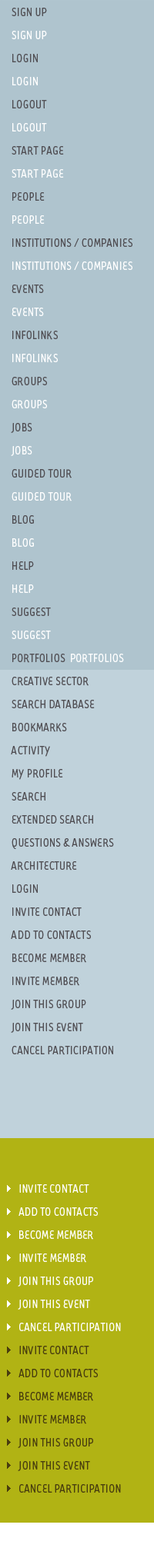
<style>
.page{position:relative;width:154px;height:1568px;background:#afc4ce}
.page>*{position:absolute;margin:0}
.t1{font:13.1px/23.1px "TarzanaNarrow";color:#504e53;text-transform:uppercase}
.t2{font:13.1px/23.1px "TarzanaNarrow";color:#ffffff;text-transform:uppercase}
.t3{font:13.1px/23.1px "TarzanaNarrow";color:#fefefe;text-transform:uppercase}
.t4{font:13.1px/23.1px "TarzanaNarrow";color:#483d0e;text-transform:uppercase}
</style>
<div class="page">
<p class="t1" style="left:11px;top:8px;width:121px;height:1485px">sign up<br><span class="t2">sign up<br></span>login<br><span class="t2">login<br></span>logout<br><span class="t2">logout<br></span>start page<br><span class="t3">start page<br></span>people<br><span class="t2">people<br></span>institutions / Companies<br><span class="t2">institutions / Companies<br></span>events<br><span class="t2">events<br></span>infolinks<br><span class="t2">infolinks<br></span>groups<br><span class="t2">groups<br></span>JOBS<br><span class="t2">JOBS<br></span>Guided Tour<br><span class="t2">Guided Tour<br></span>blog<br><span class="t2">blog<br></span>help<br><span class="t2">help<br></span>suggest<br><span class="t2">suggest<br></span>portfolios  <span class="t2">portfolios<br></span>creative sector<br>search database<br>bookmarks<br>activity<br>my profile<br>search<br>extended search<br>Questions &amp; Answers<br>architecture<br>login<br>invite contact<br>add to contacts<br>become member<br>invite member<br>join this group<br>join this event<br>cancel participation<br><span class="t2"><br><br><br><br>   <br>   invite contact<br>   add to contacts<br>   become member<br>   invite member<br>   join this group<br>   join this event<br>   cancel participation<br></span><span class="t4">   invite contact<br>   add to contacts<br>   become member<br>   invite member<br>   join this group<br>   join this event<br>   cancel participation</span></p>
</div>
